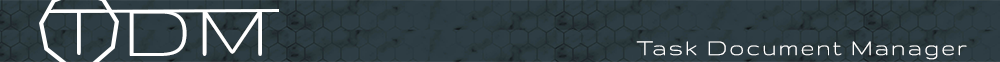
<style>
.page{position:relative;width:1000px;height:62px;background:#2e3d44}
.page>*{position:absolute;margin:0}
.t1{font:83.3px "Gruppo";letter-spacing:0.1em;color:#ffffff}
.t2{font:83.3px "Gruppo";letter-spacing:0.06em;color:#ffffff}
.t3{font:25px "Gruppo";letter-spacing:0.08em;color:#ffffff}
</style>
<div class="page">
<p class="t1" style="left:52px;top:9px;width:54px;height:46px">T</p>
<p class="t2" style="left:129px;top:10px;width:133px;height:46px">DM</p>
<p class="t3" style="left:636px;top:41px;width:331px;height:19px">Task Document Manager</p>
</div>
